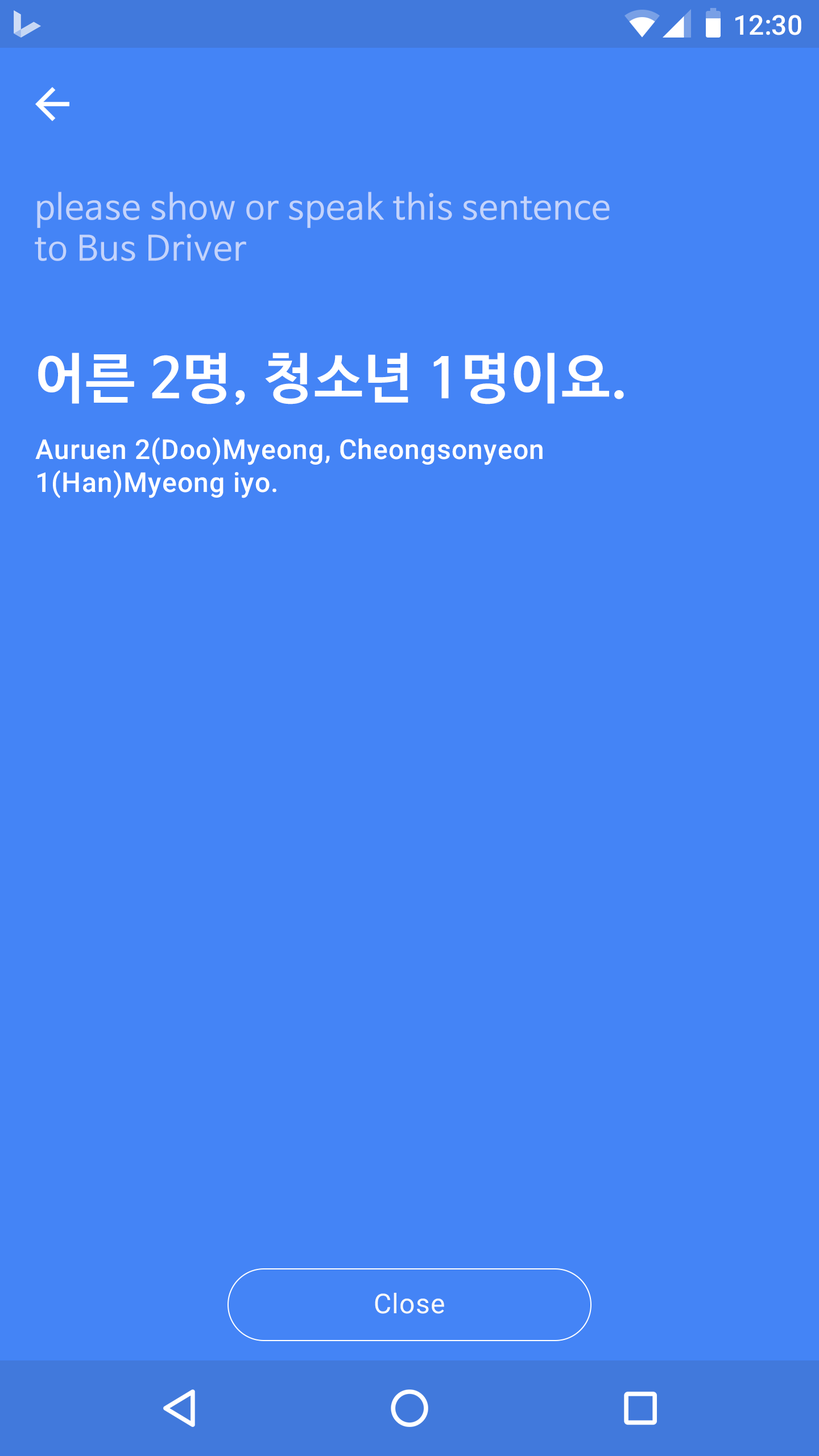
<style>
.page{position:relative;width:819px;height:1456px;background:#4484f6}
.page>*{position:absolute;margin:0}
.t1{font:27.3px "Roboto-Medium";color:#ffffff}
.t2{font:34.1px/40.9px "NanumBarunGothic";letter-spacing:0.025em;color:#c3d3fb}
.t3{font:54.6px "NanumBarunGothicBold";letter-spacing:0.025em;color:#ffffff}
.t4{font:27.3px "Roboto-Medium";letter-spacing:0.025em;color:#ffffff}
.t5{font:27.3px "Roboto-Regular";letter-spacing:0.025em;color:#fafafa}
</style>
<div class="page">
<p class="t1" style="left:735px;top:15px;width:66px;height:20px">12:30</p>
<p class="t2" style="left:35px;top:192px;width:575px;height:69px">please show or speak this sentence <br>to Bus Driver</p>
<p class="t3" style="left:38px;top:353px;width:586px;height:53px">어른 2명, 청소년 1명이요.</p>
<p class="t4" style="left:35px;top:437px;width:508px;height:61px">Auruen 2(Doo)Myeong, Cheongsonyeon<br>1(Han)Myeong iyo.</p>
<p class="t5" style="left:375px;top:1293px;width:69px;height:21px">Close</p>
</div>
